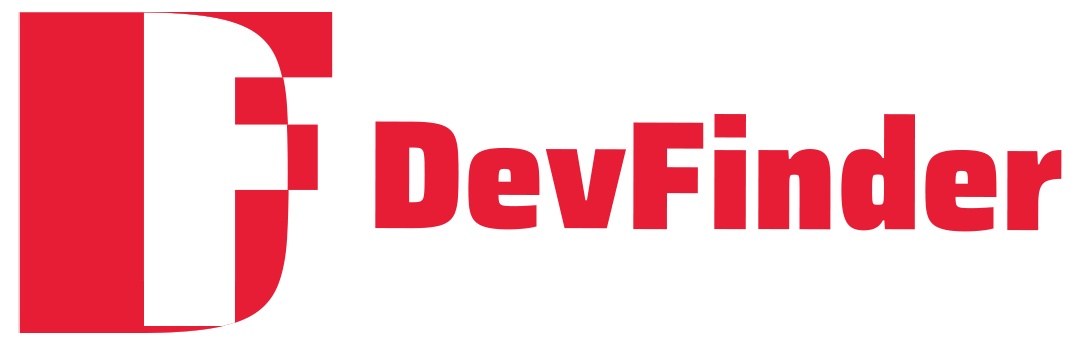
<style>
.page{position:relative;width:1089px;height:348px;background:#ffffff}
.page>*{position:absolute;margin:0}
.t1{font:154.8px "Saira-Black";color:#e71d36;scale:0.93 1}
</style>
<div class="page">
<p class="t1" style="left:375px;top:114px;width:687px;height:118px">DevFinder</p>
</div>
